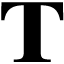
<style>
.page{position:relative;width:64px;height:64px;background:#ffffff}
.page>*{position:absolute;margin:0}
.t1{font:122.2px "PSLSriSiamADBold";color:#000000;scale:1.22 1}
</style>
<div class="page">
<p class="t1" style="left:1px;top:2px;width:63px;height:60px">T</p>
</div>
